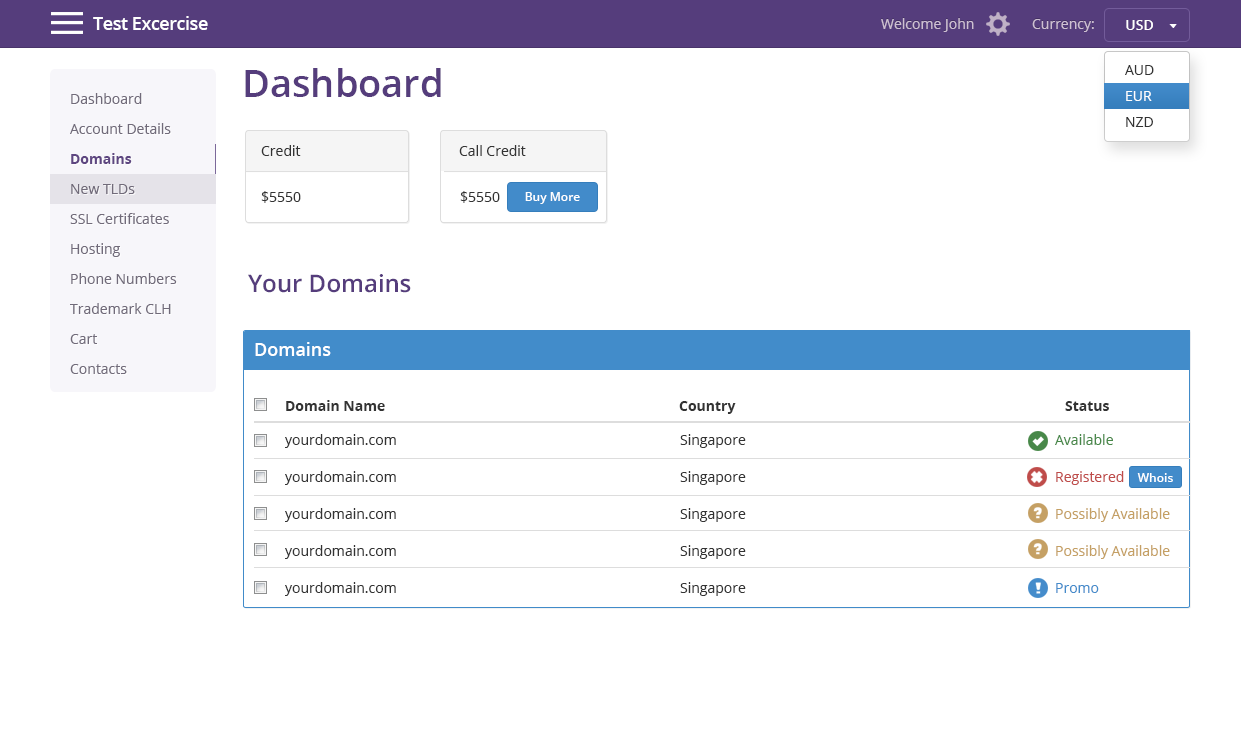
<style>
.page{position:relative;width:1241px;height:751px;background:#ffffff}
.page>*{position:absolute;margin:0}
.t1{font:18px "OpenSans-Semibold";letter-spacing:-0.025em;color:#ffffff}
.t2{font:14px "OpenSans";color:#cdbfd2}
.t3{font:14px "OpenSans-Semibold";color:#ffffff}
.t4{font:14px/26px "OpenSans";color:#333333}
.t5{font:14px/26px "OpenSans";color:#ffffff}
.t6{font:38px "OpenSans-Semibold";color:#553d7c}
.t7{font:14px/30px "OpenSans";color:#716b7a}
.t8{font:14px/30px "OpenSans-Bold";color:#5e4681}
.t9{font:14px "OpenSans";color:#333333}
.t10{font:12px "OpenSans-Semibold";color:#ffffff}
.t11{font:24px "OpenSans-Semibold";color:#553d7c}
.t12{font:18px "OpenSans-Semibold";color:#ffffff}
.t13{font:14px "OpenSans-Bold";color:#333333}
.t14{font:14px/37px "OpenSans";color:#333333}
.t15{font:14px/37px "OpenSans";color:#c5a064}
.t16{font:14px/37px "OpenSans";color:#488849}
.t17{font:14px/37px "OpenSans";color:#bf4c4a}
.t18{font:14px/37px "OpenSans";color:#458ccb}
</style>
<div class="page">
<p class="t1" style="left:93px;top:16px;width:115px;height:14px">Test Excercise</p>
<p class="t2" style="left:881px;top:18px;width:93px;height:14px">Welcome John</p>
<p class="t2" style="left:1032px;top:19px;width:62px;height:13px">Currency:</p>
<p class="t3" style="left:1126px;top:20px;width:27px;height:10px">USD</p>
<p class="t4" style="left:1125px;top:65px;width:29px;height:62px">AUD<br><span class="t5">EUR<br></span>NZD</p>
<p class="t6" style="left:245px;top:68px;width:196px;height:29px">Dashboard</p>
<p class="t7" style="left:70px;top:93px;width:107px;height:281px">Dashboard<br>Account Details<br><span class="t8">Domains<br></span>New TLDs<br>SSL Certificates<br>Hosting<br>Phone Numbers<br>Trademark CLH<br>Cart<br>Contacts</p>
<p class="t9" style="left:261px;top:145px;width:40px;height:11px">Credit</p>
<p class="t9" style="left:459px;top:145px;width:67px;height:11px">Call Credit</p>
<p class="t9" style="left:261px;top:191px;width:40px;height:12px">$5550</p>
<p class="t9" style="left:460px;top:191px;width:40px;height:12px">$5550</p>
<p class="t10" style="left:525px;top:192px;width:55px;height:12px">Buy More</p>
<p class="t11" style="left:248px;top:274px;width:163px;height:19px">Your Domains</p>
<p class="t12" style="left:255px;top:342px;width:76px;height:14px">Domains</p>
<p class="t13" style="left:286px;top:400px;width:99px;height:11px">Domain Name</p>
<p class="t13" style="left:679px;top:401px;width:57px;height:13px">Country</p>
<p class="t13" style="left:1065px;top:401px;width:44px;height:10px">Status</p>
<p class="t14" style="left:285px;top:434px;width:111px;height:162px">yourdomain.com<br>yourdomain.com<br>yourdomain.com<br>yourdomain.com<br>yourdomain.com</p>
<p class="t14" style="left:680px;top:434px;width:66px;height:162px">Singapore<br>Singapore<br>Singapore<br>Singapore<br>Singapore</p>
<p class="t15" style="left:1055px;top:434px;width:115px;height:159px"><span class="t16">Available<br></span><span class="t17">Registered<br></span>Possibly Available<br>Possibly Available<br><span class="t18">Promo</span></p>
<p class="t10" style="left:1137px;top:473px;width:36px;height:9px">Whois</p>
</div>
